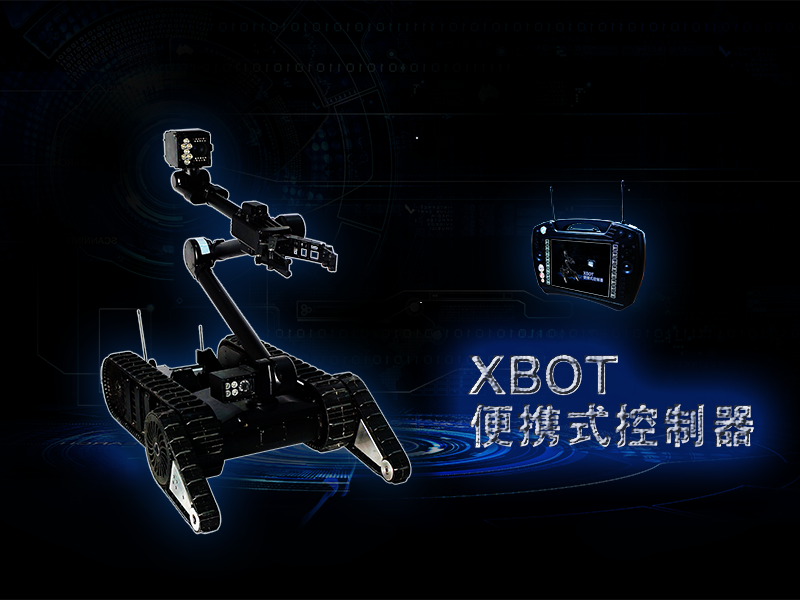
<style>
.page{position:relative;width:800px;height:600px}
.page>*{position:absolute;margin:0}
.t1{font:47.1px/50.1px "AdobeHeitiStd-Regular";font-weight:bold}
.t2{font:47.1px/50.1px "HiraginoSansGB-W6";font-weight:bold}
</style>
<div class="page">
<p class="t1" style="left:467px;top:354px;width:287px;height:94px"><span class="t2">XBOT<br></span>便携式控制器</p>
</div>
